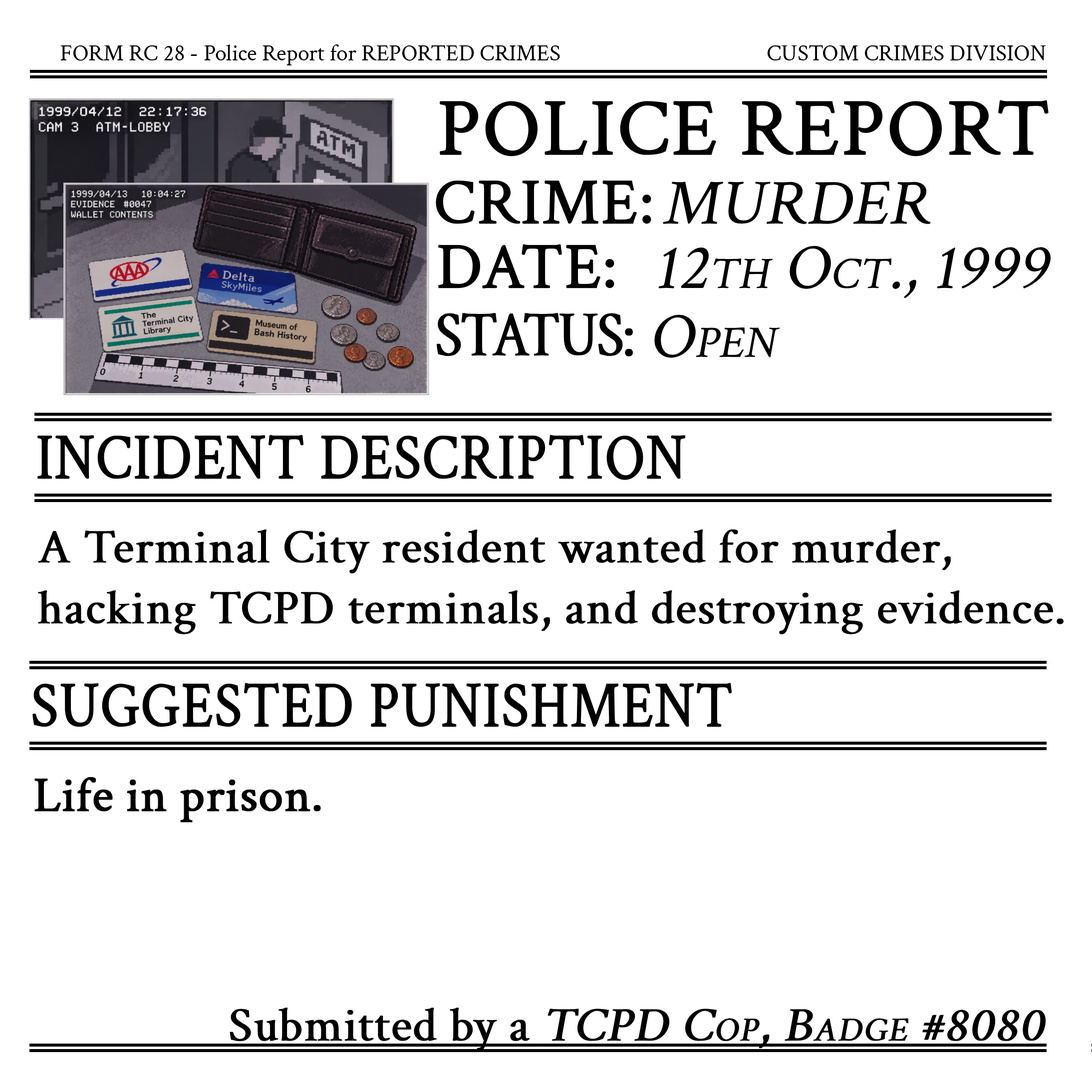
<style>
.page{position:relative;width:1092px;height:1092px;background:#ffffff}
.page>*{position:absolute;margin:0}
.t1{font:22.9px "CrimsonText-Regular";color:#000000}
.t2{font:80.9px "CrimsonText-Regular";color:#000000;font-variant:small-caps;font-weight:bold}
.t3{font:64.6px "CrimsonText-Regular";color:#000000;font-variant:small-caps;font-weight:bold}
.t4{font:64.6px "CrimsonText-Regular";color:#000000;font-variant:small-caps;font-style:italic}
.t5{font:64.7px "CrimsonText-Regular";letter-spacing:-0.05em;color:#000000;font-variant:small-caps;font-weight:bold;scale:0.87 1}
.t6{font:64.7px "CrimsonText-Regular";color:#000000;font-variant:small-caps;font-weight:bold;scale:0.87 1}
.t7{font:48.8px/61px "CrimsonText-Regular";color:#000000;font-weight:bold}
.t8{font:48.8px "CrimsonText-Regular";color:#000000;font-weight:bold}
.t9{font:48.8px "CrimsonText-Regular";color:#000000;font-variant:small-caps;font-weight:bold;font-style:italic}
</style>
<div class="page">
<p class="t1" style="left:60px;top:44px;width:500px;height:21px">FORM RC 28 - Police Report for REPORTED CRIMES</p>
<p class="t1" style="left:768px;top:45px;width:278px;height:16px">CUSTOM CRIMES DIVISION</p>
<p class="t2" style="left:440px;top:100px;width:609px;height:56px">POLICE REPORT</p>
<p class="t3" style="left:436px;top:180px;width:215px;height:44px">CRIME:</p>
<p class="t4" style="left:663px;top:182px;width:268px;height:42px">MURDER</p>
<p class="t3" style="left:438px;top:244px;width:176px;height:44px">DATE:</p>
<p class="t4" style="left:658px;top:246px;width:393px;height:52px">12th Oct., 1999</p>
<p class="t5" style="left:437px;top:313px;width:196px;height:43px">STATUS:</p>
<p class="t4" style="left:653px;top:314px;width:127px;height:45px">Open</p>
<p class="t6" style="left:37px;top:435px;width:649px;height:45px">INCIDENT DESCRIPTION</p>
<p class="t7" style="left:38px;top:529px;width:1026px;height:105px">A Terminal City resident wanted for murder,<br>hacking TCPD terminals, and destroying evidence.</p>
<p class="t6" style="left:32px;top:683px;width:700px;height:44px">SUGGESTED PUNISHMENT</p>
<p class="t8" style="left:34px;top:777px;width:287px;height:45px">Life in prison.</p>
<p class="t9" style="left:230px;top:1007px;width:816px;height:45px"><span class="t8">Submitted by </span><span class="t8">a </span>TCPD Cop, Badge #8080</p>
</div>
